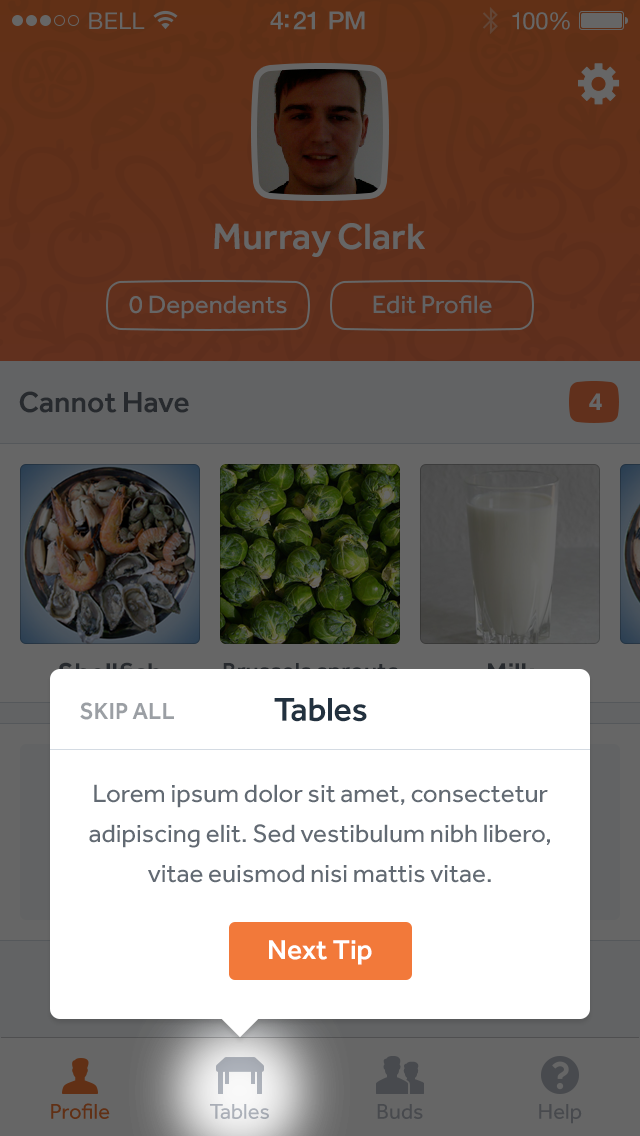
<style>
.page{position:relative;width:640px;height:1136px;background:#ffffff}
.page>*{position:absolute;margin:0}
.t1{font:23px "HelveticaNeue";letter-spacing:0.02em;color:#666666}
.t2{font:25px "HelveticaNeue-Medium";letter-spacing:-0.02em;color:#666666}
.t3{font:24px "HelveticaNeue";letter-spacing:-0.02em;color:#666666}
.t4{font:38px "Effra-Medium";color:#666666}
.t5{font:26px "Effra-Regular";color:#666666}
.t6{font:26px "Effra-Regular";color:#626364}
.t7{font:30px "Effra-Medium";color:#272a2e}
.t8{font:26px "Effra-Bold";color:#666666}
.t9{font:24px "Effra-Medium";color:#9b9fa4;text-transform:uppercase}
.t10{font:34px "Effra-Medium";letter-spacing:-0.01em;color:#22313f}
.t11{font:26px/40px "Effra-Regular";color:#626a73}
.t12{font:28px "Effra-Medium";color:#ffffff}
.t13{font:22px "Effra-Regular";color:#613015}
.t14{font:22px "Effra-Regular";color:#aaafb8}
.t15{font:22px "Effra-Regular";color:#484a4e}
</style>
<div class="page">
<p class="t1" style="left:89px;top:12px;width:56px;height:17px">BELL</p>
<p class="t2" style="left:270px;top:11px;width:95px;height:19px">4:21 PM</p>
<p class="t3" style="left:512px;top:12px;width:58px;height:18px">100%</p>
<p class="t4" style="left:214px;top:223px;width:211px;height:34px">Murray Clark</p>
<p class="t5" style="left:129px;top:295px;width:158px;height:24px">0 Dependents</p>
<p class="t6" style="left:373px;top:295px;width:119px;height:19px">Edit Profile</p>
<p class="t7" style="left:19px;top:391px;width:170px;height:22px">Cannot Have</p>
<p class="t8" style="left:589px;top:393px;width:13px;height:17px">4</p>
<p class="t9" style="left:80px;top:702px;width:94px;height:18px">Skip All</p>
<p class="t10" style="left:274px;top:698px;width:93px;height:24px">Tables</p>
<p class="t11" style="left:89px;top:784px;width:461px;height:99px;text-align:center">Lorem ipsum dolor sit amet, consectetur adipiscing elit. Sed vestibulum nibh libero, vitae euismod nisi mattis vitae.</p>
<p class="t12" style="left:269px;top:940px;width:103px;height:25px">Next Tip</p>
<p class="t13" style="left:51px;top:1103px;width:59px;height:16px">Profile</p>
<p class="t14" style="left:210px;top:1104px;width:59px;height:15px">Tables</p>
<p class="t15" style="left:377px;top:1104px;width:46px;height:15px">Buds</p>
<p class="t15" style="left:539px;top:1104px;width:43px;height:20px">Help</p>
</div>
